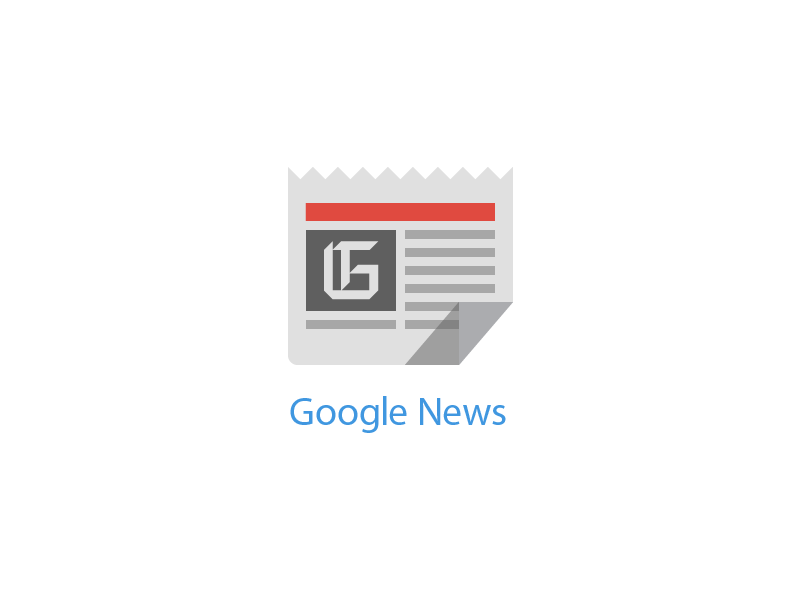
<style>
.page{position:relative;width:800px;height:600px;background:#ffffff}
.page>*{position:absolute;margin:0}
.t1{font:40px "MyriadPro-Regular";color:#4097e0}
</style>
<div class="page">
<p class="t1" style="left:290px;top:396px;width:216px;height:37px">Google News</p>
</div>
